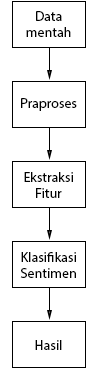
<style>
.page{position:relative;width:100px;height:370px;background:#ffffff}
.page>*{position:absolute;margin:0}
.t1{font:14px "MyriadPro-Regular";color:#000000}
</style>
<div class="page">
<p class="t1" style="left:26px;top:11px;width:45px;height:26px;text-align:center">Data<br>mentah</p>
<p class="t1" style="left:21px;top:98px;width:56px;height:13px">Praproses</p>
<p class="t1" style="left:24px;top:172px;width:49px;height:26px;text-align:center">Ekstraksi<br>Fitur</p>
<p class="t1" style="left:20px;top:252px;width:56px;height:26px;text-align:center">Klasifikasi<br>Sentimen</p>
<p class="t1" style="left:35px;top:340px;width:27px;height:10px">Hasil</p>
</div>
